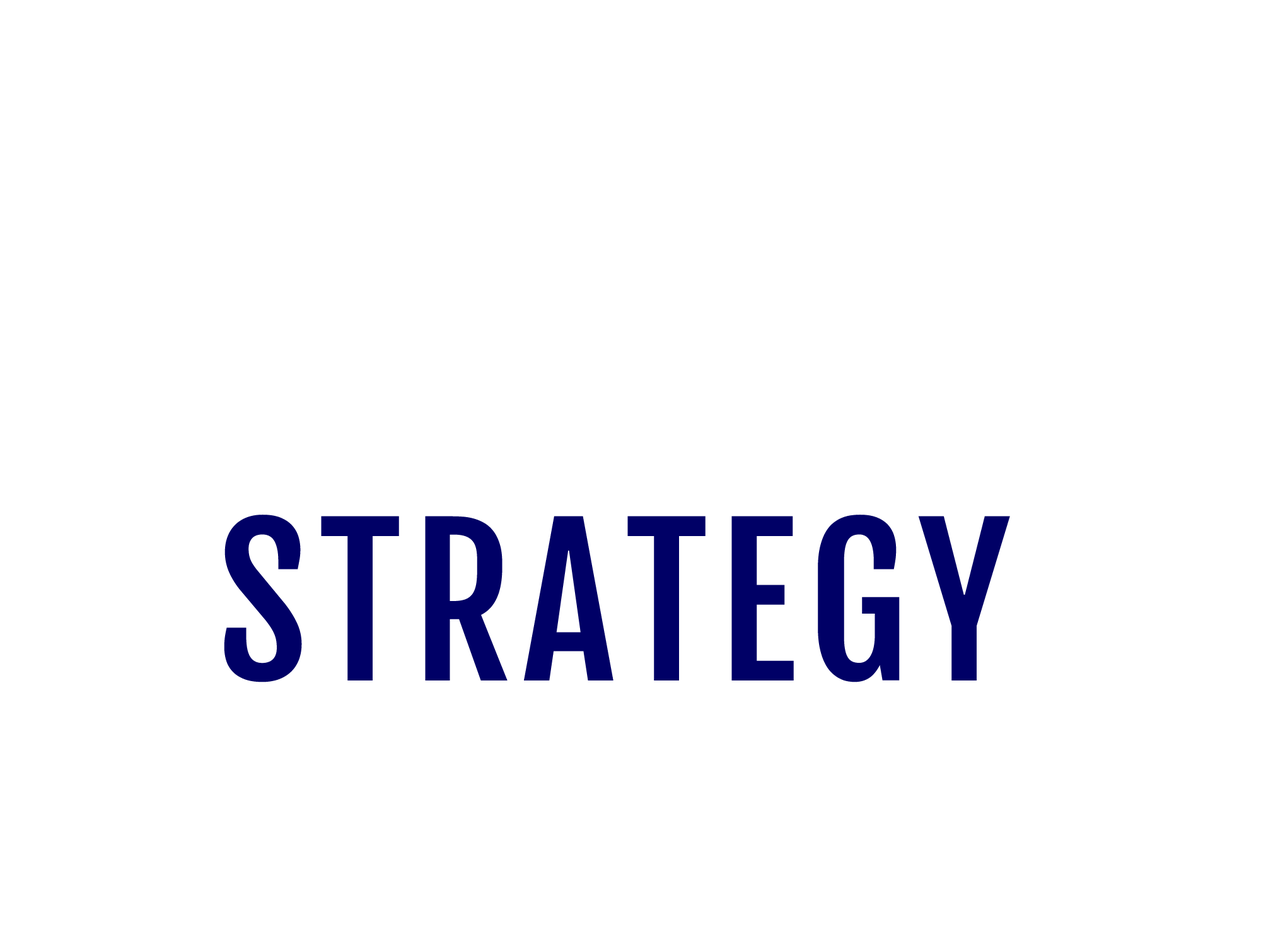
<style>
.page{position:relative;width:1261px;height:946px;background:#ffffff}
.page>*{position:absolute;margin:0}
.t1{font:196.7px "FjallaOne-Regular";letter-spacing:0.05em;color:#000066}
</style>
<div class="page">
<p class="t1" style="left:224px;top:514px;width:786px;height:168px">STRATEGY</p>
</div>
